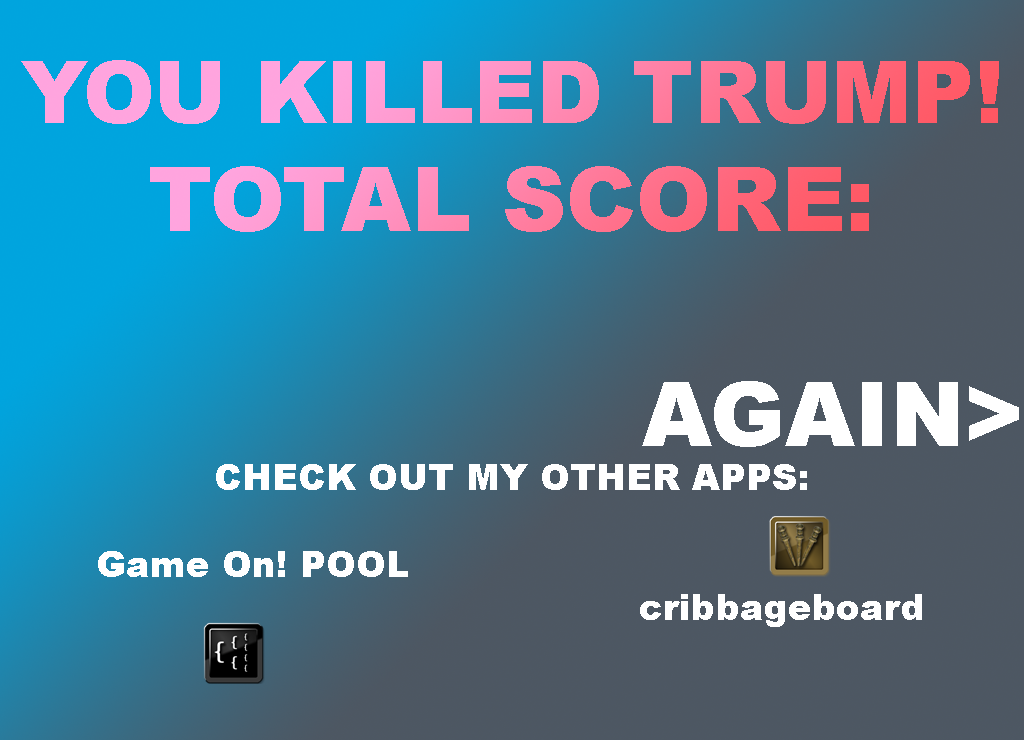
<style>
.page{position:relative;width:1024px;height:740px}
.page>*{position:absolute;margin:0}
.t1{font:36px "Arial-Black"}
.t2{font:86px "Arial-Black"}
.t3{font:90px "Arial-Black"}
</style>
<div class="page">
<p class="t1" style="left:21px;top:60px;width:978px;height:567px;text-align:center"><span class="t2">YOU KILLED TRUMP!<br></span><span class="t3">TOTAL SCORE:<br><br><br></span>CHECK OUT MY OTHER APPS:<br> <br>        Game On! POOL<br>                cribbageboard</p>
</div>
